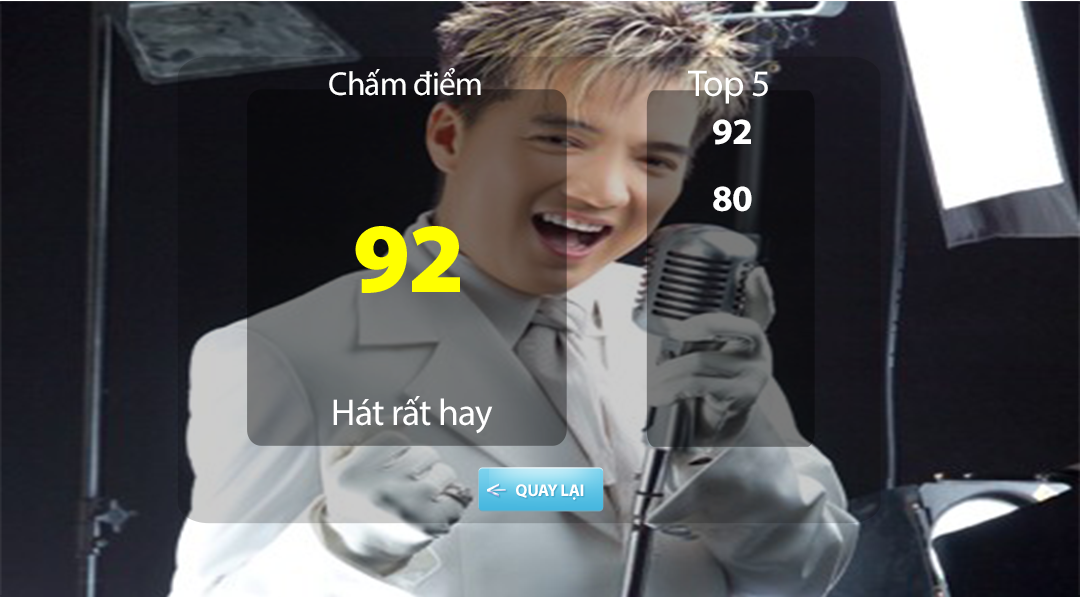
<style>
.page{position:relative;width:1080px;height:597px}
.page>*{position:absolute;margin:0}
.t1{font:33.3px "MyriadPro-Regular";letter-spacing:-0.02em;color:#ffffff}
.t2{font:37.5px "MyriadPro-Regular";letter-spacing:-0.02em;color:#ffffff}
.t3{font:37.5px "MyriadPro-Bold";letter-spacing:-0.02em;color:#ffffff}
.t4{font:100px "MyriadPro-Black";letter-spacing:-0.02em;color:#ffff00}
.t5{font:25px "MyriadPro-Bold";letter-spacing:-0.025em}
.t6{font:17.2px "MyriadPro-Bold";letter-spacing:-0.025em;color:#ffffff}
</style>
<div class="page">
<p class="t1" style="left:329px;top:68px;width:152px;height:28px">Chấm điểm</p>
<p class="t2" style="left:688px;top:70px;width:80px;height:34px">Top 5</p>
<p class="t3" style="left:713px;top:119px;width:38px;height:26px">92</p>
<p class="t3" style="left:713px;top:186px;width:39px;height:26px">80</p>
<p class="t4" style="left:355px;top:226px;width:105px;height:67px">92</p>
<p class="t2" style="left:333px;top:396px;width:160px;height:38px">Hát rất hay</p>
<p class="t5" style="left:487px;top:483px;width:13px;height:14px">&lt;</p>
<p class="t6" style="left:516px;top:484px;width:68px;height:16px">QUAY LẠI</p>
</div>
